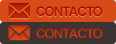
<style>
.page{position:relative;width:116px;height:44px;background:#3d3431}
.page>*{position:absolute;margin:0}
.t1{font:13px "Arial-BoldMT";letter-spacing:-0.075em;color:#a91705;text-transform:uppercase}
.t2{font:13px "Arial-BoldMT";letter-spacing:-0.075em;color:#c5310d;text-transform:uppercase}
</style>
<div class="page">
<p class="t1" style="left:36px;top:6px;width:67px;height:11px">CONTACTO</p>
<p class="t2" style="left:36px;top:28px;width:67px;height:11px">CONTACTO</p>
</div>
